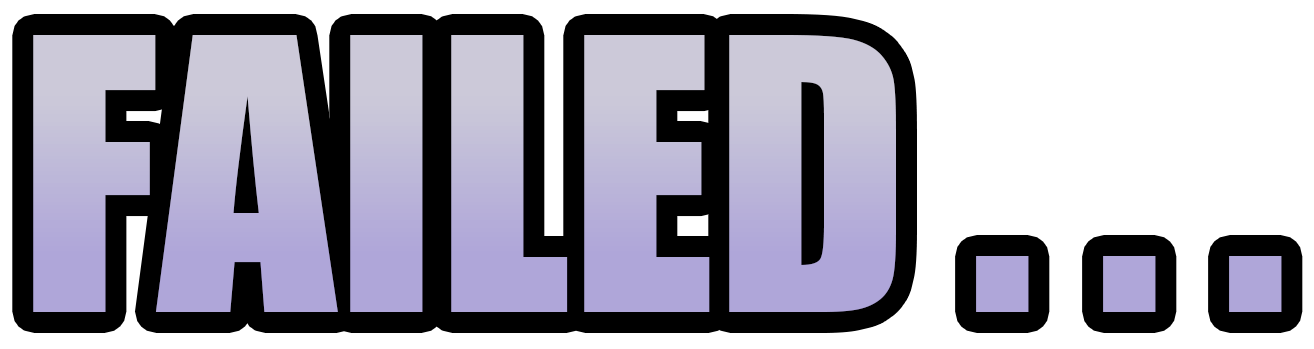
<style>
.page{position:relative;width:1314px;height:349px;background:#ffffff}
.page>*{position:absolute;margin:0}
.t1{font:350px "Impact";color:#bcb7d9}
</style>
<div class="page">
<p class="t1" style="left:33px;top:35px;width:1249px;height:277px">FAILED . . .</p>
</div>
